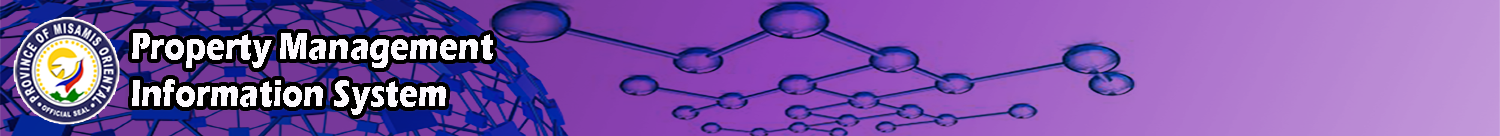
<style>
.page{position:relative;width:1500px;height:136px}
.page>*{position:absolute;margin:0}
.t1{font:39.1px "ErasITC-Bold";color:#fbf8fd;scale:0.82 1}
</style>
<div class="page">
<p class="t1" style="left:132px;top:33px;width:361px;height:82px">Property Management<br>Information System</p>
</div>
